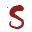
<style>
.page{position:relative;width:32px;height:32px;background:#ffffff}
.page>*{position:absolute;margin:0}
.t1{font:72px "Chiller-Regular";color:#8a211c}
</style>
<div class="page">
<p class="t1" style="left:7px;top:5px;width:17px;height:24px">s</p>
</div>
